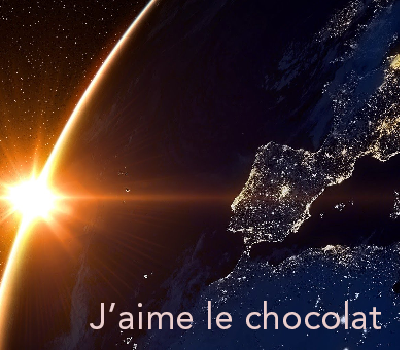
<style>
.page{position:relative;width:400px;height:350px}
.page>*{position:absolute;margin:0}
.t1{font:36px "AvenirLTStd-Roman";color:#eacece}
</style>
<div class="page">
<p class="t1" style="left:90px;top:301px;width:291px;height:28px">J’aime le chocolat</p>
</div>
